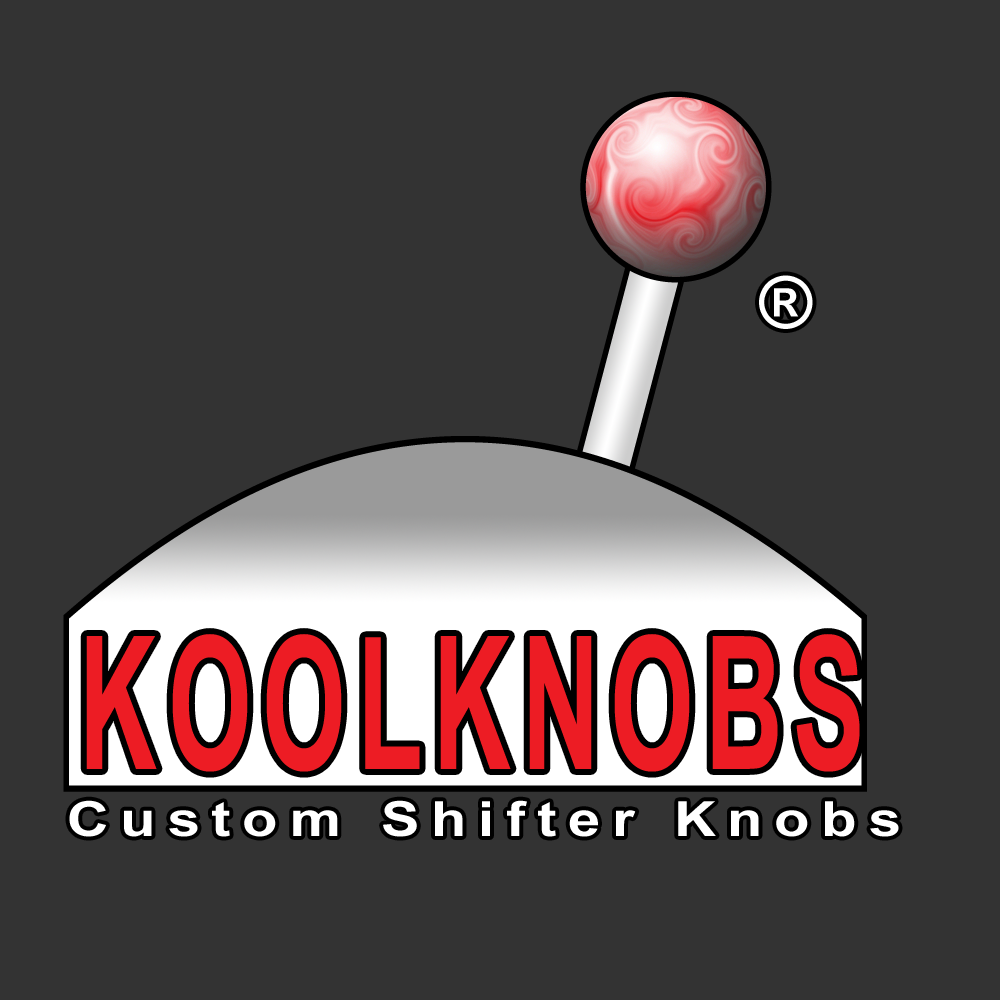
<style>
.page{position:relative;width:1000px;height:1000px;background:#333333}
.page>*{position:absolute;margin:0}
.t1{font:72px "Arial-BoldMT";color:#ffffff}
.t2{font:185.2px "Arial-BoldMT";letter-spacing:0.1em;color:#ed1c24;scale:0.58 1}
.t3{font:48.4px "Arial-BoldMT";letter-spacing:0.2em;color:#ffffff;scale:1.2 1}
</style>
<div class="page">
<p class="t1" style="left:759px;top:275px;width:54px;height:54px">®</p>
<p class="t2" style="left:86px;top:634px;width:774px;height:138px">KOOLKNOBS</p>
<p class="t3" style="left:69px;top:800px;width:830px;height:37px">Custom Shifter Knobs</p>
</div>
